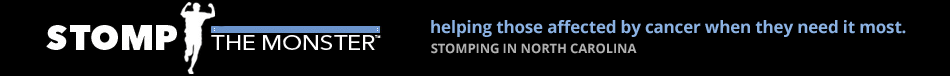
<style>
.page{position:relative;width:950px;height:76px;background:#000000}
.page>*{position:absolute;margin:0}
.t1{font:17px "OpenSans-Bold";letter-spacing:-0.01em;color:#8bb2e3}
.t2{font:13px "OpenSans-Bold";letter-spacing:-0.01em;color:#b0b0b0}
</style>
<div class="page">
<p class="t1" style="left:431px;top:20px;width:475px;height:17px">helping those affected by cancer when they need it most.</p>
<p class="t2" style="left:431px;top:43px;width:206px;height:11px">STOMPING IN NORTH CAROLINA</p>
</div>
